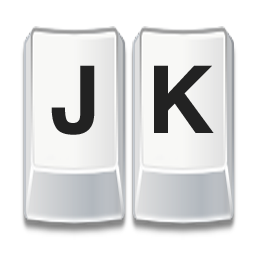
<style>
.page{position:relative;width:256px;height:256px;background:#ffffff}
.page>*{position:absolute;margin:0}
.t1{font:93.4px "Helvetica-Bold";color:#222222}
</style>
<div class="page">
<p class="t1" style="left:51px;top:65px;width:44px;height:70px">J</p>
<p class="t1" style="left:154px;top:65px;width:60px;height:68px">K</p>
</div>
